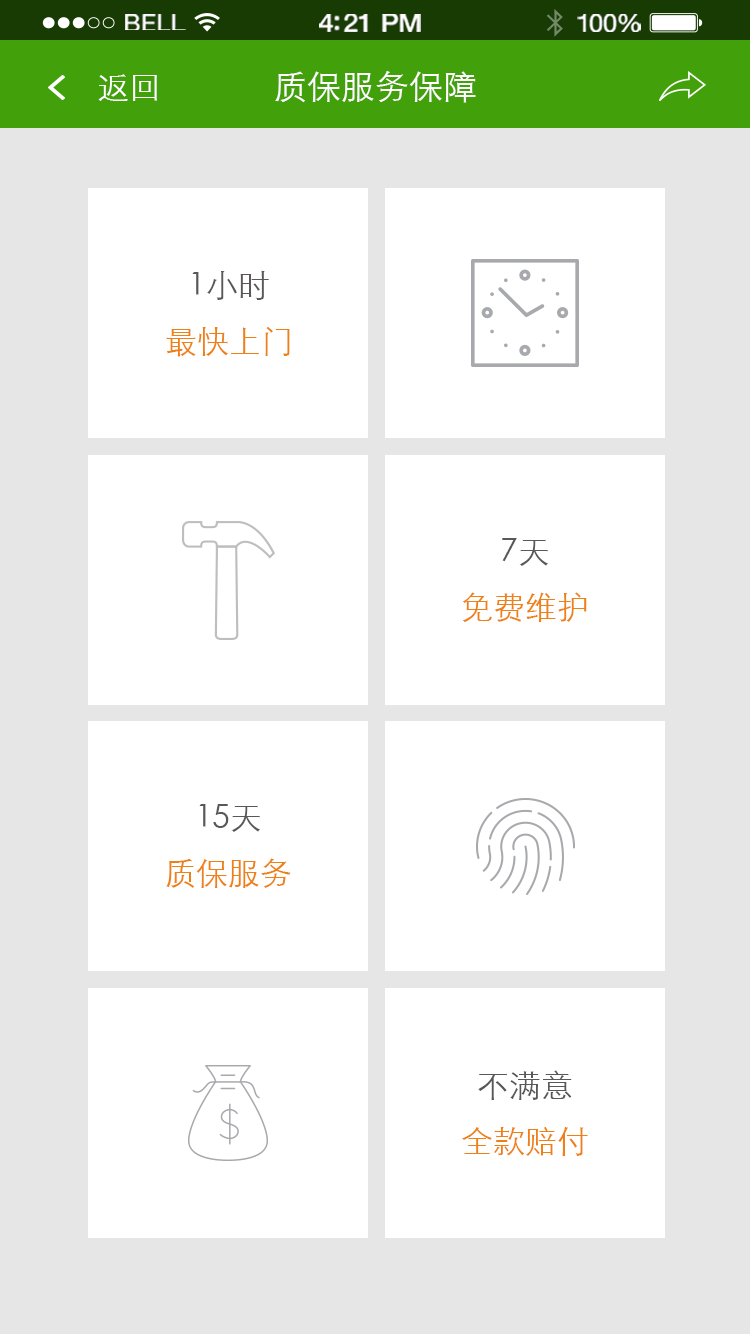
<style>
.page{position:relative;width:750px;height:1334px;background:#ffffff}
.page>*{position:absolute;margin:0}
.t1{font:23.3px "HelveticaNeue";letter-spacing:0.02em;color:#ffffff;scale:1.06 1}
.t2{font:25.3px "HelveticaNeue-Medium";letter-spacing:-0.02em;color:#ffffff;scale:1.06 1}
.t3{font:24.3px "HelveticaNeue";letter-spacing:-0.02em;color:#ffffff;scale:1.06 1}
.t4{font:32px "STXihei";color:#ffffff}
.t5{font:34px "STXihei";color:#ffffff}
.t6{font:32px/56px "STXihei";color:#ef8014}
.t7{font:32px/56px "STXihei";color:#595757}
</style>
<div class="page">
<p class="t1" style="left:125px;top:14px;width:61px;height:16px">BELL</p>
<p class="t2" style="left:319px;top:14px;width:102px;height:18px">4:21 PM</p>
<p class="t3" style="left:577px;top:14px;width:64px;height:18px">100%</p>
<p class="t4" style="left:98px;top:74px;width:59px;height:27px">返回</p>
<p class="t5" style="left:275px;top:71px;width:201px;height:32px">质保服务保障</p>
<p class="t6" style="left:166px;top:270px;width:124px;height:87px;text-align:center"><span class="t7">1小时<br></span>最快上门</p>
<p class="t6" style="left:463px;top:538px;width:124px;height:84px;text-align:center"><span class="t7">7天<br></span>免费维护</p>
<p class="t6" style="left:166px;top:804px;width:125px;height:84px;text-align:center"><span class="t7">15天<br></span>质保服务</p>
<p class="t6" style="left:462px;top:1070px;width:126px;height:86px;text-align:center"><span class="t7">不满意<br></span>全款赔付</p>
</div>
